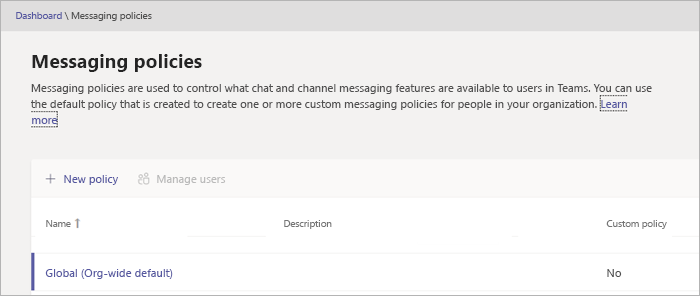
<style>
.page{position:relative;width:700px;height:296px;background:#f3f2f1}
.page>*{position:absolute;margin:0}
.t1{font:9.7px "SegoeUI";color:#505050}
.t2{font:9.7px "SegoeUI";color:#5557a0}
.t3{font:19.3px "SegoeUI-Bold";color:#242424}
.t4{font:11.2px/16px "SegoeUI";color:#505050}
.t5{font:11.2px "SegoeUI";color:#5557a0}
.t6{font:11.2px "SegoeUI";color:#bababa}
.t7{font:9.6px "SegoeUI";color:#757575}
.t8{font:11.3px "SegoeUI";color:#5557a0}
.t9{font:11.3px "SegoeUI";color:#505050}
</style>
<div class="page">
<p class="t1" style="left:16px;top:12px;width:136px;height:9px"><span class="t2">Dashboard </span>\ Messaging policies</p>
<p class="t3" style="left:32px;top:54px;width:170px;height:18px">Messaging policies</p>
<p class="t4" style="left:31px;top:84px;width:621px;height:26px">Messaging policies are used to control what chat and channel messaging features are available to users in Teams. You can use<br>the default policy that is created to create one or more custom messaging policies for people in your organization.</p>
<p class="t5" style="left:601px;top:100px;width:26px;height:8px">Learn</p>
<p class="t5" style="left:32px;top:118px;width:25px;height:6px">more</p>
<p class="t5" style="left:64px;top:175px;width:54px;height:10px">New policy</p>
<p class="t6" style="left:157px;top:175px;width:69px;height:10px">Manage users</p>
<p class="t7" style="left:46px;top:220px;width:25px;height:7px">Name</p>
<p class="t7" style="left:284px;top:220px;width:48px;height:9px">Description</p>
<p class="t7" style="left:606px;top:220px;width:61px;height:9px">Custom policy</p>
<p class="t8" style="left:45px;top:269px;width:128px;height:10px">Global (Org-wide default)</p>
<p class="t9" style="left:607px;top:269px;width:15px;height:8px">No</p>
</div>
